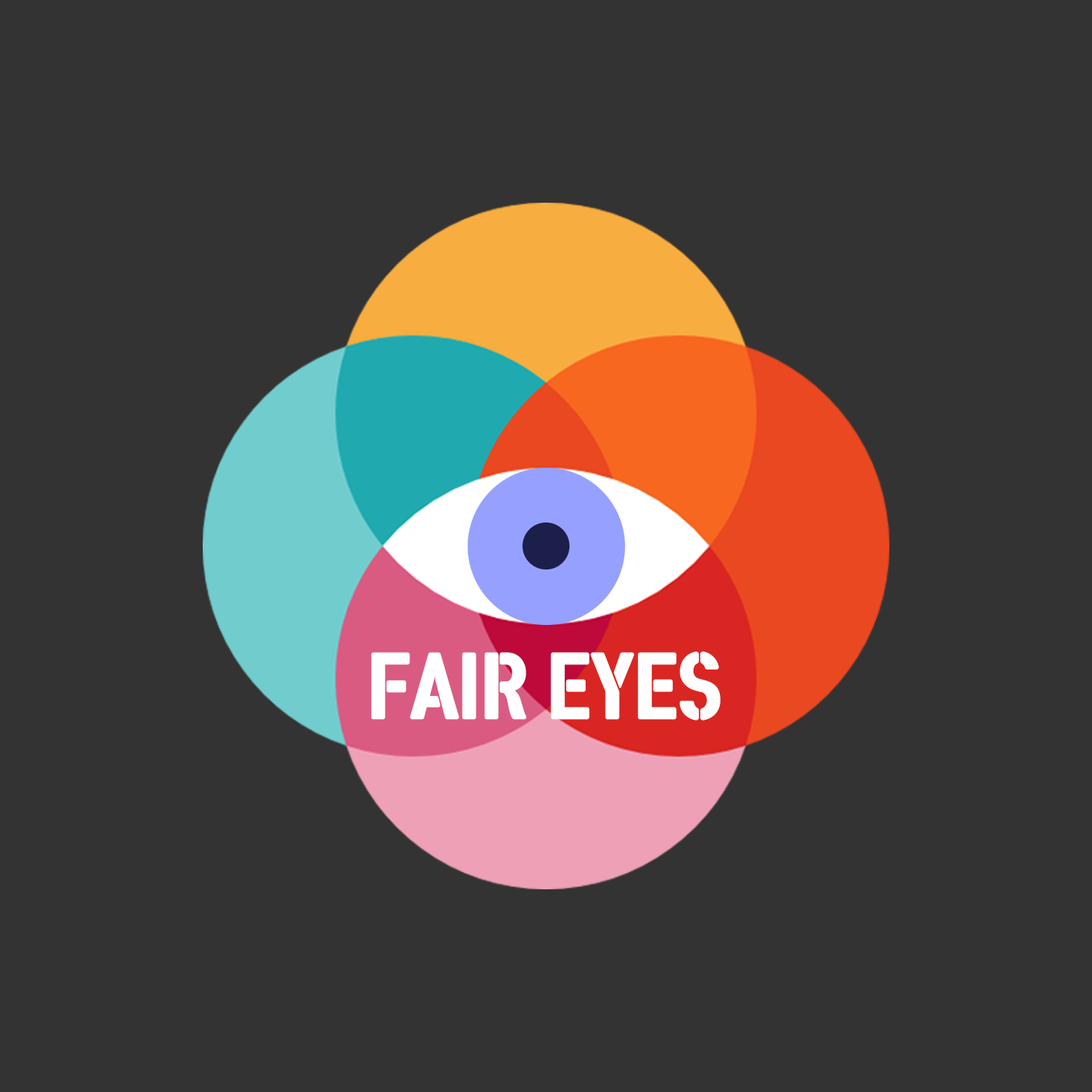
<style>
.page{position:relative;width:1092px;height:1092px;background:#333333}
.page>*{position:absolute;margin:0}
.t1{font:77.1px "RixPosterR";color:#ffffff;scale:1.07 1}
</style>
<div class="page">
<p class="t1" style="left:371px;top:651px;width:350px;height:70px">FAIR EYES</p>
</div>
